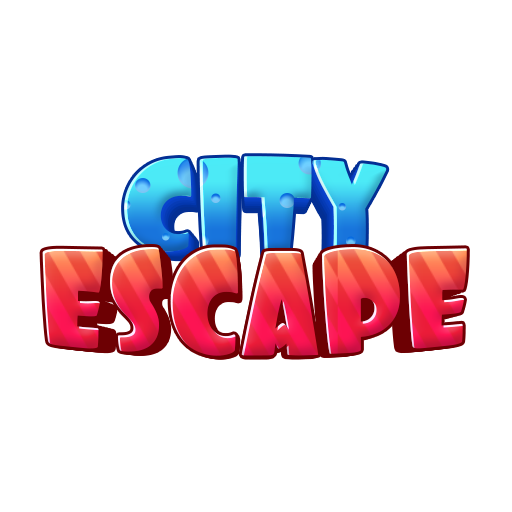
<style>
.page{position:relative;width:512px;height:512px;background:#ffffff}
.page>*{position:absolute;margin:0}
.t1{font:120.1px "Foo-Regular";letter-spacing:-0.01em}
.t2{font:117.6px "Foo-Regular";letter-spacing:-0.01em}
.t3{font:115.3px "Foo-Regular";letter-spacing:-0.01em}
.t4{font:113px "Foo-Regular";letter-spacing:-0.01em}
.t5{font:110.7px "Foo-Regular";letter-spacing:-0.01em}
.t6{font:137.5px "Foo-Regular";letter-spacing:-0.005em;scale:0.91 1}
.t7{font:134.8px "Foo-Regular";letter-spacing:-0.005em;scale:0.91 1}
.t8{font:132.1px "Foo-Regular";letter-spacing:-0.005em;scale:0.91 1}
.t9{font:126.8px "Foo-Regular";letter-spacing:-0.005em;scale:0.91 1}
.t10{font:124.3px "Foo-Regular";letter-spacing:-0.005em;scale:0.91 1}
</style>
<div class="page">
<p class="t1" style="left:129px;top:162px;width:252px;height:92px">CITY</p>
<p class="t2" style="left:131px;top:165px;width:248px;height:90px">CITY</p>
<p class="t3" style="left:134px;top:168px;width:242px;height:89px">CITY</p>
<p class="t4" style="left:136px;top:171px;width:238px;height:87px">CITY</p>
<p class="t5" style="left:138px;top:173px;width:233px;height:86px">CITY</p>
<p class="t6" style="left:42px;top:247px;width:425px;height:109px">ESCAPE</p>
<p class="t7" style="left:46px;top:249px;width:417px;height:107px">ESCAPE</p>
<p class="t8" style="left:51px;top:251px;width:408px;height:105px">ESCAPE</p>
<p class="t9" style="left:59px;top:256px;width:392px;height:101px">ESCAPE</p>
<p class="t10" style="left:62px;top:258px;width:385px;height:99px">ESCAPE</p>
</div>
